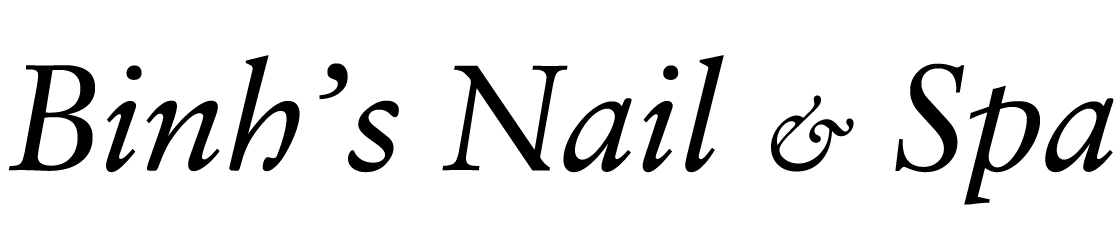
<style>
.page{position:relative;width:1120px;height:250px;background:#ffffff}
.page>*{position:absolute;margin:0}
.t1{font:150px "ClassicalGaramondBT-Italic";color:#000000}
.t2{font:99px "ClassicalGaramondBT-Italic";color:#000000}
</style>
<div class="page">
<p class="t1" style="left:9px;top:55px;width:1105px;height:150px">Binh’s Nail <span class="t2">&amp;</span> Spa</p>
</div>
